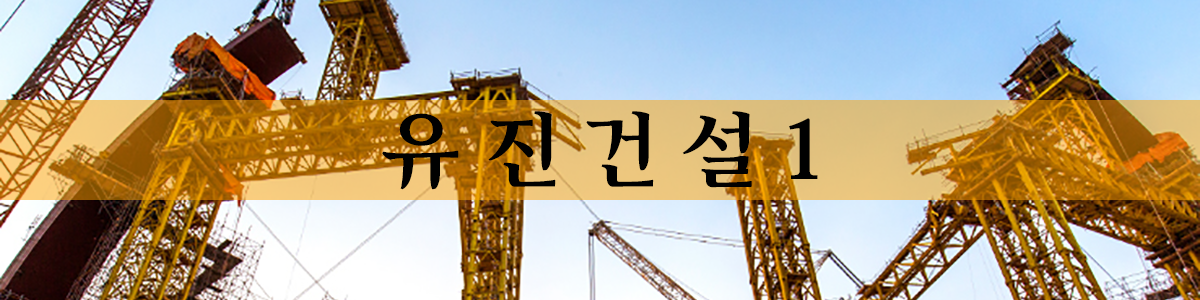
<style>
.page{position:relative;width:1200px;height:300px}
.page>*{position:absolute;margin:0}
.t1{font:83.3px "Arita-buri-Bold_OTF";color:#010101}
</style>
<div class="page">
<p class="t1" style="left:382px;top:111px;width:436px;height:79px">유 진 건 설 1</p>
</div>
